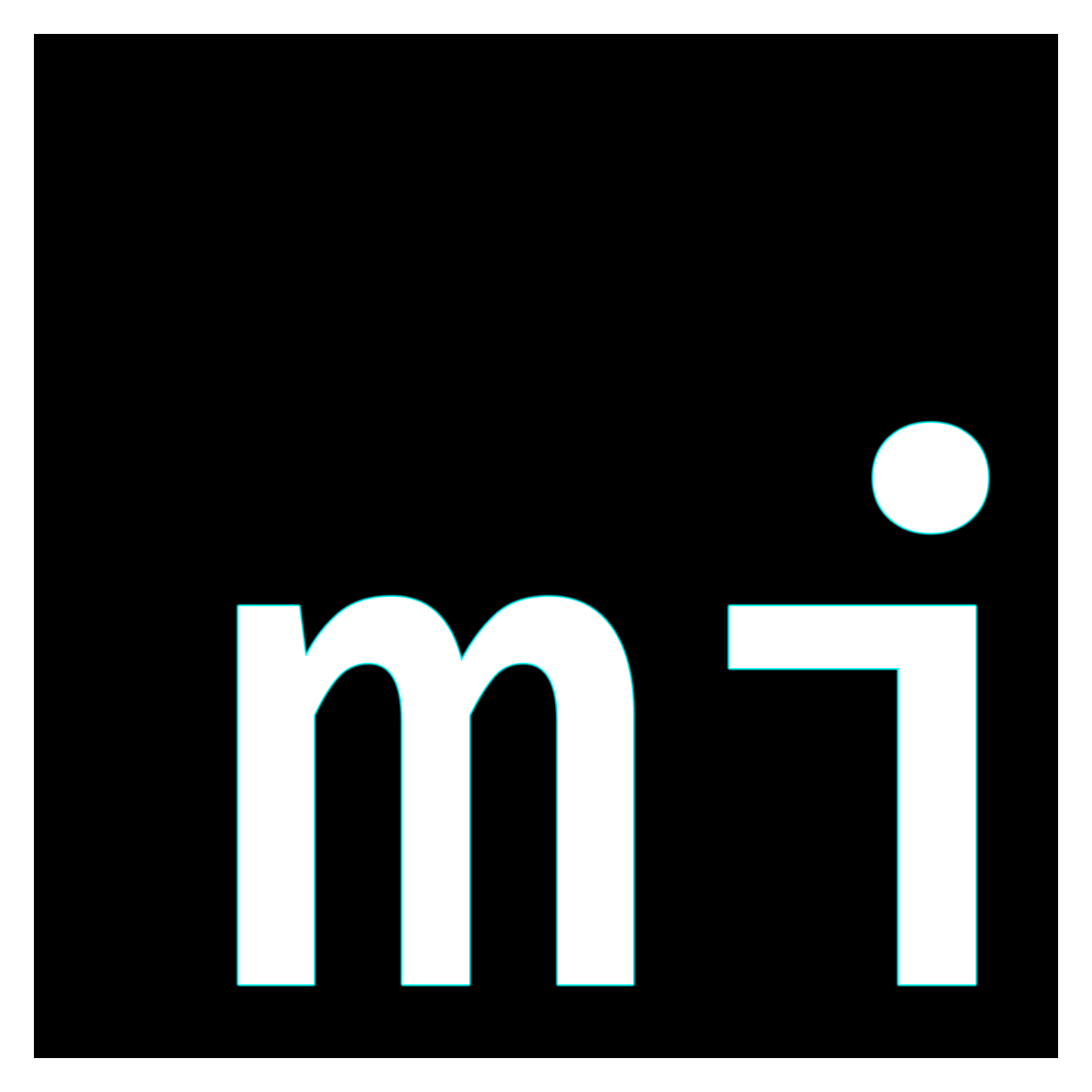
<style>
.page{position:relative;width:1092px;height:1092px;background:#000000}
.page>*{position:absolute;margin:0}
.t1{font:773.2px "SourceCodePro-Medium";color:#ffffff}
</style>
<div class="page">
<p class="t1" style="left:238px;top:422px;width:751px;height:562px">mi</p>
</div>
